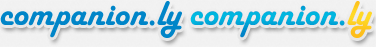
<style>
.page{position:relative;width:376px;height:47px;background:#f1f1f1}
.page>*{position:absolute;margin:0}
.t1{font:36px "HarlowSolid";color:#0085c8}
.t2{font:36px "HarlowSolid"}
</style>
<div class="page">
<p class="t1" style="left:0px;top:1px;width:182px;height:37px">companion.ly</p>
<p class="t2" style="left:190px;top:1px;width:182px;height:37px">companion.ly</p>
</div>
